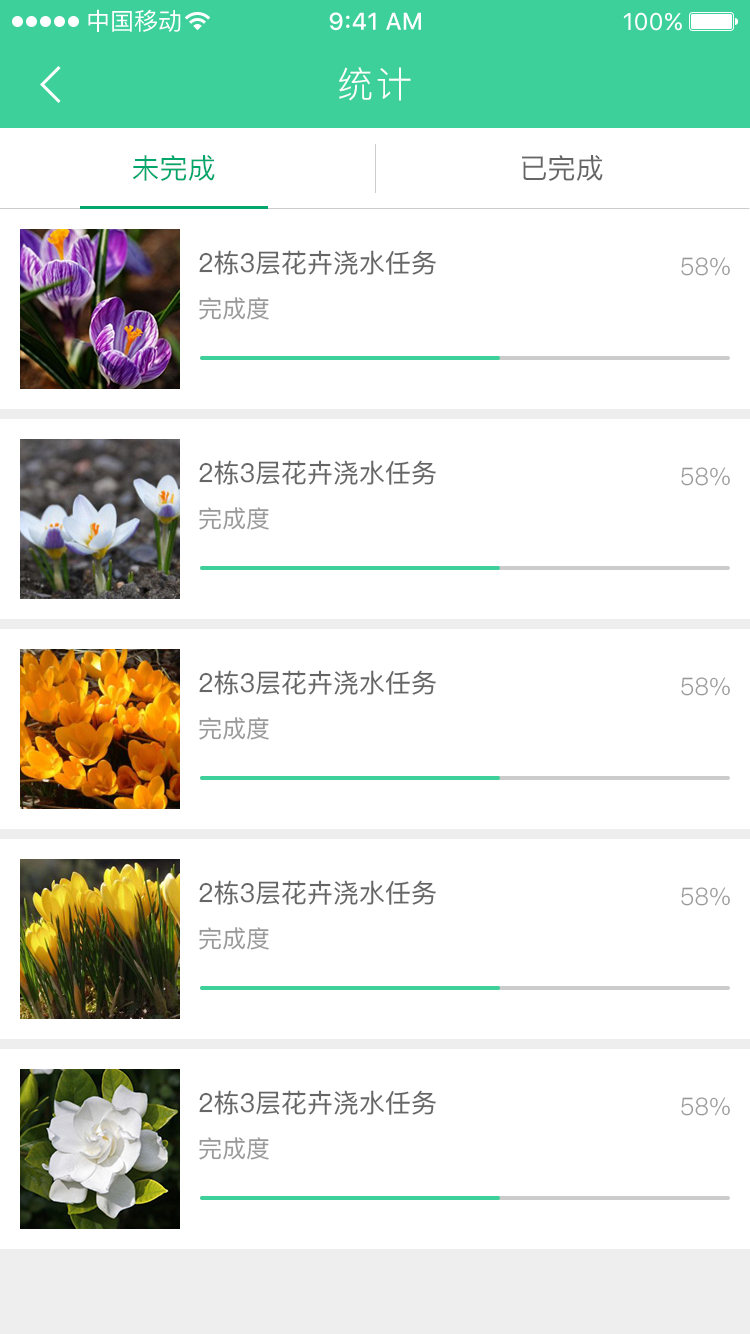
<style>
.page{position:relative;width:750px;height:1334px;background:#ffffff}
.page>*{position:absolute;margin:0}
.t1{font:36px "PingFang-SC-Regular";letter-spacing:0.1em;color:#ffffff}
.t2{font:28px "PingFang-SC-Medium";color:#04a76b}
.t3{font:28px "PingFang-SC-Medium";color:#666666}
.t4{font:26px "PingFang-SC-Medium";color:#666666}
.t5{font:24px "PingFang-SC-Regular";color:#999999}
.t6{font:24px "PingFang-SC-Medium";color:#999999}
</style>
<div class="page">
<p class="t1" style="left:339px;top:67px;width:72px;height:34px">统计</p>
<p class="t2" style="left:133px;top:155px;width:82px;height:26px">未完成</p>
<p class="t3" style="left:522px;top:155px;width:81px;height:26px">已完成</p>
<p class="t4" style="left:199px;top:250px;width:237px;height:25px">2栋3层花卉浇水任务</p>
<p class="t5" style="left:681px;top:257px;width:49px;height:19px">58%</p>
<p class="t6" style="left:199px;top:297px;width:70px;height:23px">完成度</p>
<p class="t4" style="left:199px;top:460px;width:237px;height:25px">2栋3层花卉浇水任务</p>
<p class="t5" style="left:681px;top:467px;width:49px;height:19px">58%</p>
<p class="t6" style="left:199px;top:507px;width:70px;height:23px">完成度</p>
<p class="t4" style="left:199px;top:670px;width:237px;height:25px">2栋3层花卉浇水任务</p>
<p class="t5" style="left:681px;top:677px;width:49px;height:19px">58%</p>
<p class="t6" style="left:199px;top:717px;width:70px;height:23px">完成度</p>
<p class="t4" style="left:199px;top:880px;width:237px;height:25px">2栋3层花卉浇水任务</p>
<p class="t5" style="left:681px;top:887px;width:49px;height:19px">58%</p>
<p class="t6" style="left:199px;top:927px;width:70px;height:23px">完成度</p>
<p class="t4" style="left:199px;top:1090px;width:237px;height:25px">2栋3层花卉浇水任务</p>
<p class="t5" style="left:681px;top:1097px;width:49px;height:19px">58%</p>
<p class="t6" style="left:199px;top:1137px;width:70px;height:23px">完成度</p>
</div>
